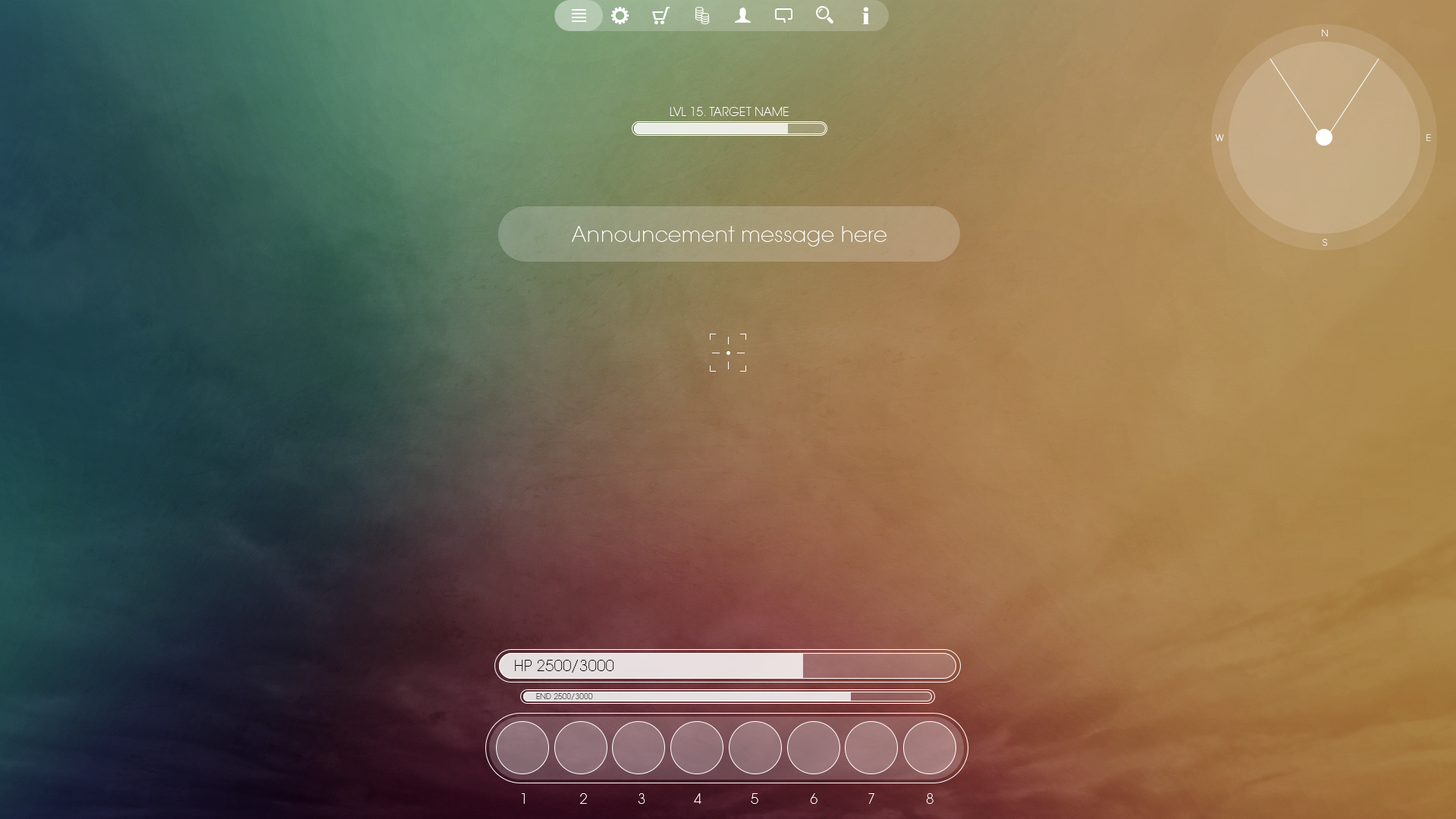
<style>
.page{position:relative;width:1456px;height:819px}
.page>*{position:absolute;margin:0}
.t1{font:23.4px "AbrilFatface-Regular";letter-spacing:0.02em;color:#ffffff}
.t2{font:9.1px "ITCAvantGardePro-XLt";letter-spacing:0.02em;color:#ffffff}
.t3{font:11.6px "ITCAvantGardePro-XLt";letter-spacing:0.02em;color:#ffffff}
.t4{font:20.7px "ITCAvantGardePro-XLt";letter-spacing:0.02em;color:#ffffff}
.t5{font:15.2px "ITCAvantGardePro-XLt";letter-spacing:0.02em;color:#000000;text-transform:uppercase}
.t6{font:7.6px "ITCAvantGardePro-XLt";letter-spacing:0.02em;text-transform:uppercase}
.t7{font:13.7px "ITCAvantGardePro-XLt";letter-spacing:0.02em;color:#ffffff;text-transform:uppercase}
</style>
<div class="page">
<p class="t1" style="left:862px;top:7px;width:8px;height:17px">i</p>
<p class="t2" style="left:1322px;top:30px;width:6px;height:6px">N</p>
<p class="t3" style="left:670px;top:107px;width:119px;height:9px">LVL 15. TARGET NAME</p>
<p class="t2" style="left:1216px;top:134px;width:8px;height:7px">W</p>
<p class="t2" style="left:1426px;top:134px;width:5px;height:7px">E</p>
<p class="t4" style="left:572px;top:226px;width:314px;height:20px">Announcement message here</p>
<p class="t2" style="left:1323px;top:239px;width:5px;height:7px">S</p>
<p class="t5" style="left:515px;top:660px;width:99px;height:13px">HP 2500/3000</p>
<p class="t6" style="left:536px;top:693px;width:57px;height:7px">END 2500/3000</p>
<p class="t7" style="left:521px;top:793px;width:4px;height:11px">1</p>
<p class="t7" style="left:580px;top:793px;width:7px;height:11px">2</p>
<p class="t7" style="left:638px;top:793px;width:7px;height:11px">3</p>
<p class="t7" style="left:694px;top:793px;width:7px;height:11px">4</p>
<p class="t7" style="left:751px;top:793px;width:7px;height:11px">5</p>
<p class="t7" style="left:810px;top:793px;width:7px;height:11px">6</p>
<p class="t7" style="left:868px;top:793px;width:6px;height:11px">7</p>
<p class="t7" style="left:926px;top:793px;width:7px;height:11px">8</p>
</div>
